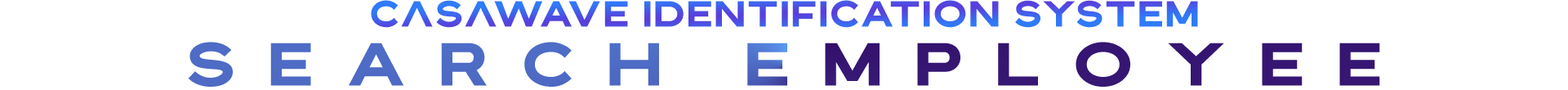
<style>
.page{position:relative;width:1568px;height:90px;background:#ffffff}
.page>*{position:absolute;margin:0}
.t1{font:31.8px "Bristone";letter-spacing:0.06em}
.t2{font:53.3px "Bristone";letter-spacing:0.58em;scale:1.05 1}
</style>
<div class="page">
<p class="t1" style="left:371px;top:0px;width:827px;height:28px">CaSaWAVE IDENTIFICATION SYSTEM</p>
<p class="t2" style="left:188px;top:42px;width:1192px;height:45px">SEARCH EMPLOYEE</p>
</div>
